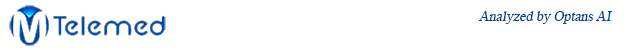
<style>
.page{position:relative;width:640px;height:50px;background:#ffffff}
.page>*{position:absolute;margin:0}
.t1{font:14px "TimesNewRomanPSMT";color:#024599;font-style:italic}
</style>
<div class="page">
<p class="t1" style="left:478px;top:11px;width:135px;height:13px">Analyzed by Optans AI</p>
</div>
